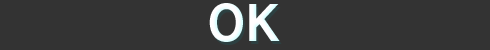
<style>
.page{position:relative;width:490px;height:50px;background:#333333}
.page>*{position:absolute;margin:0}
.t1{font:48px "RodinPro-B";color:#fffeff}
</style>
<div class="page">
<p class="t1" style="left:209px;top:3px;width:71px;height:39px">OK</p>
</div>
